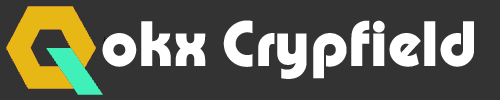
<style>
.page{position:relative;width:500px;height:100px;background:#333333}
.page>*{position:absolute;margin:0}
.t1{font:67px "PumpDemiBoldLetPlain";color:#ffffff}
</style>
<div class="page">
<p class="t1" style="left:102px;top:20px;width:372px;height:59px">okx Crypfield</p>
</div>
